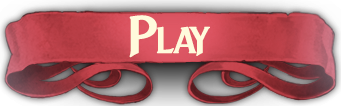
<style>
.page{position:relative;width:341px;height:106px}
.page>*{position:absolute;margin:0}
.t1{font:55px "DragonFire";color:#fffadc;font-variant:small-caps;font-weight:bold}
</style>
<div class="page">
<p class="t1" style="left:129px;top:15px;width:81px;height:43px">Play</p>
</div>
